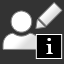
<style>
.page{position:relative;width:64px;height:64px;background:#333333}
.page>*{position:absolute;margin:0}
.t1{font:24px "BellMTBold";color:#ffffff}
</style>
<div class="page">
<p class="t1" style="left:46px;top:38px;width:7px;height:16px">i</p>
</div>
